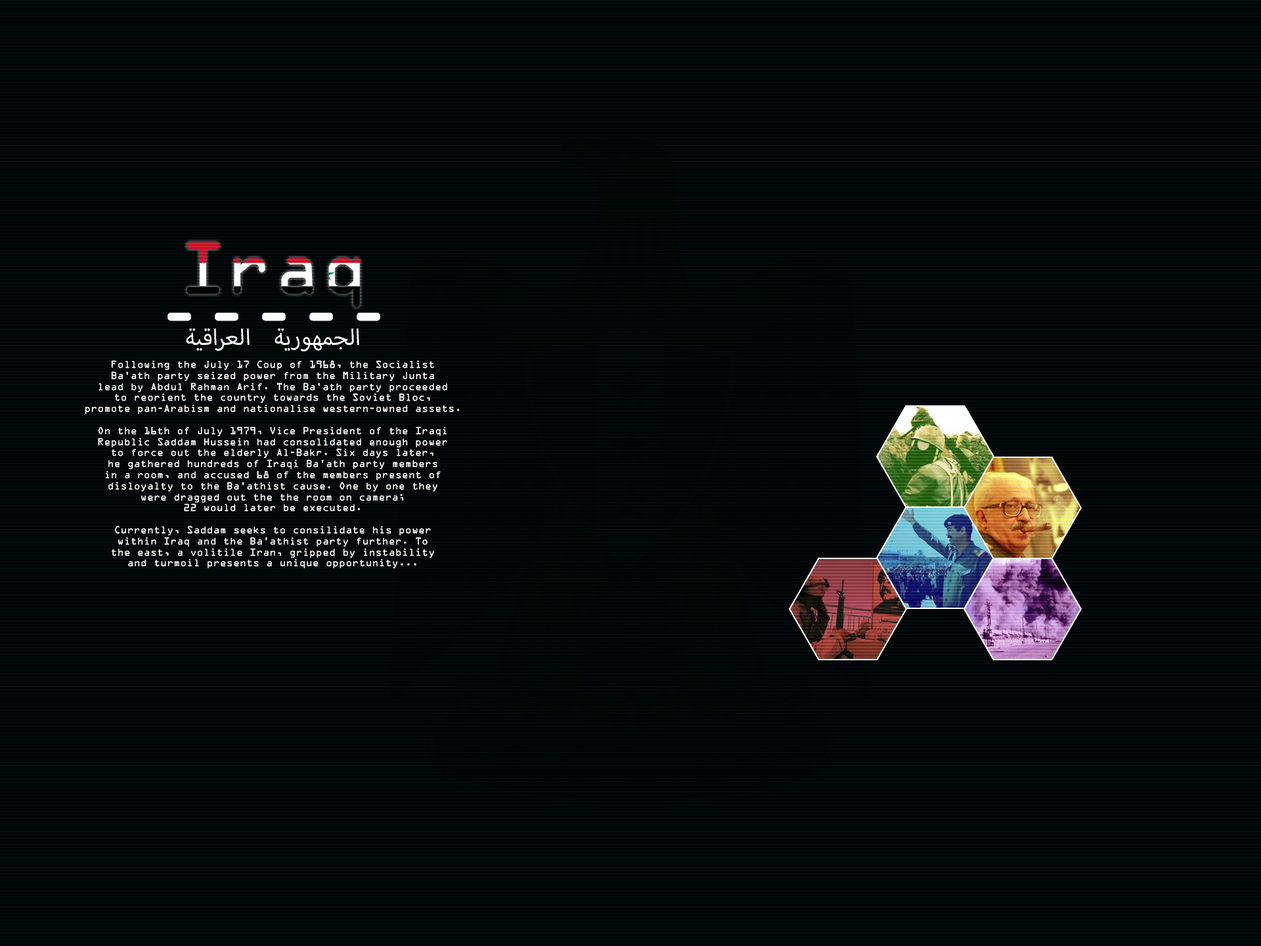
<style>
.page{position:relative;width:1261px;height:946px}
.page>*{position:absolute;margin:0}
.t1{font:65.7px "OCRABeckerRUS-LAT";color:#ffffff}
.t2{font:31.5px "MyriadArabic-Regular";color:#ffffff}
.t3{font:9.2px "OCRABeckerRUS-LAT";color:#ffffff}
</style>
<div class="page">
<p class="t1" style="left:167px;top:313px;width:213px;height:8px">-----</p>
<p class="t2" style="left:186px;top:328px;width:173px;height:23px">الجمهورية العراقية</p>
<p class="t3" style="left:85px;top:360px;width:375px;height:208px;text-align:center">Following the July 17 Coup of 1968, the Socialist<br>Ba’ath party seized power from the Military Junta<br>lead by Abdul Rahman Arif. The Ba’ath party proceeded<br>to reorient the country towards the Soviet Bloc,<br>promote pan-Arabism and nationalise western-owned assets.<br><br>On the 16th of July 1979, Vice President of the Iraqi<br>Republic Saddam Hussein had consolidated enough power<br>to force out the elderly Al-Bakr. Six days later,<br>he gathered hundreds of Iraqi Ba’ath party members<br>in a room, and accused 68 of the members present of<br>disloyalty to the Ba’athist cause. One by one they<br>were dragged out the the room on camera;<br>22 would later be executed.<br><br>Currently, Saddam seeks to consilidate his power<br>within Iraq and the Ba’athist party further. To<br>the east, a volitile Iran, gripped by instability<br>and turmoil presents a unique opportunity...</p>
</div>
